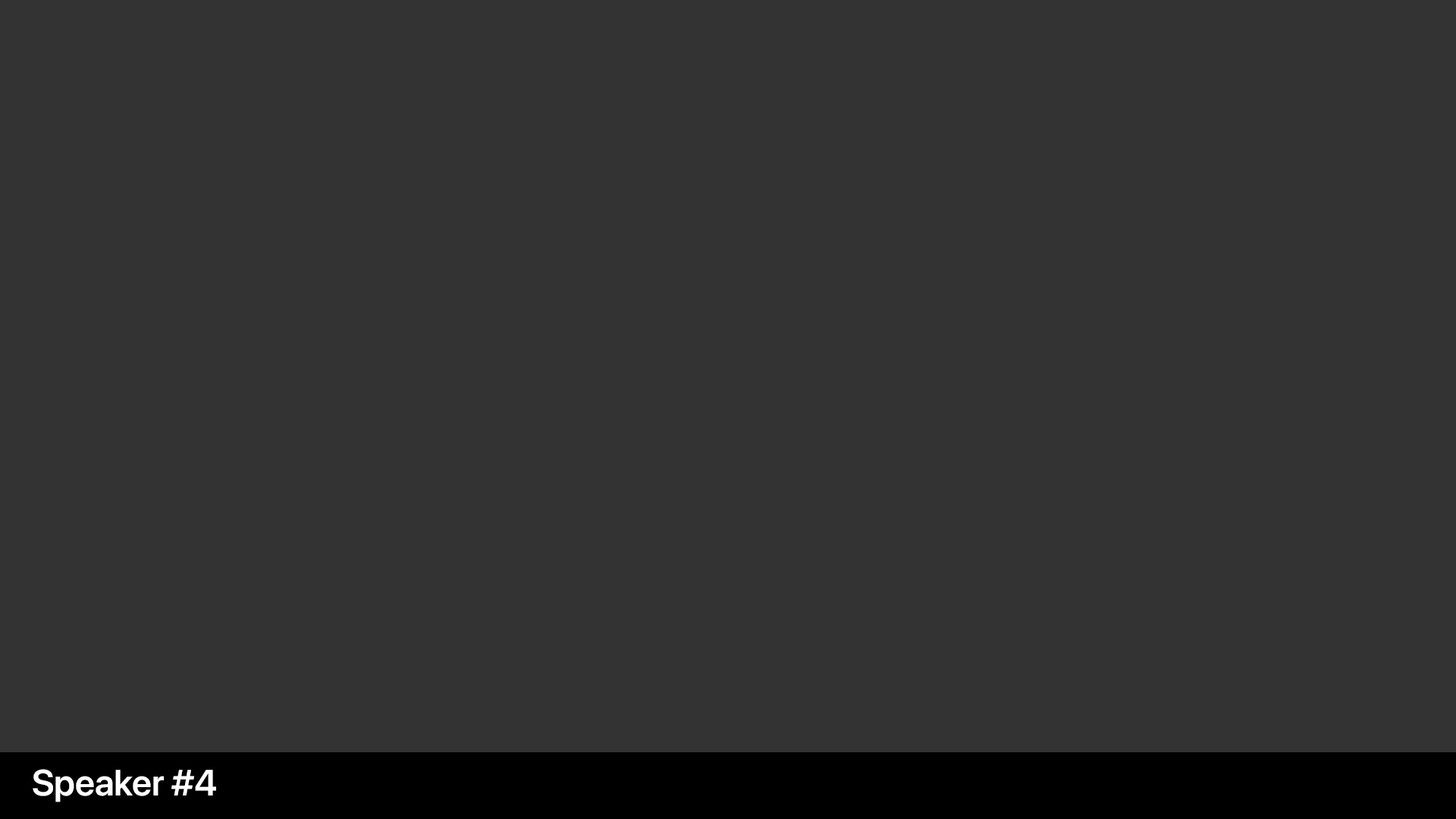
<style>
.page{position:relative;width:1456px;height:819px;background:#333333}
.page>*{position:absolute;margin:0}
.t1{font:36.4px "SFProDisplay-Semibold";color:#ffffff}
</style>
<div class="page">
<p class="t1" style="left:33px;top:769px;width:183px;height:33px">Speaker #4</p>
</div>
